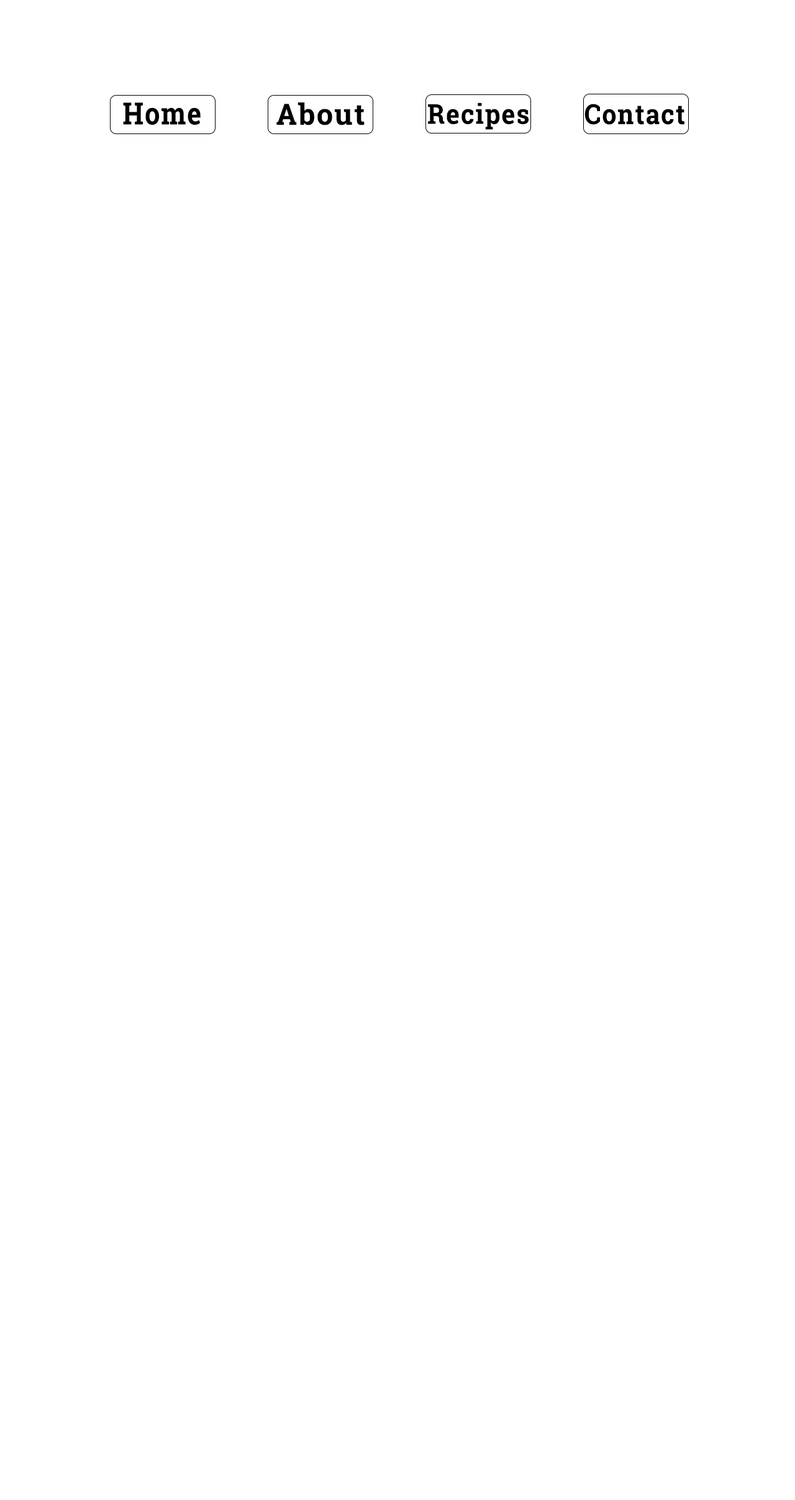
<style>
.page{position:relative;width:795px;height:1500px;background:#ffffff}
.page>*{position:absolute;margin:0}
.t1{font:30.6px "RobotoSlab-Bold";letter-spacing:0.05em;color:#000000;scale:0.87 1}
.t2{font:29.1px "RobotoSlab-Bold";letter-spacing:0.05em;color:#000000}
.t3{font:27.4px "RobotoSlab-Bold";letter-spacing:0.05em;color:#000000;scale:0.93 1}
.t4{font:27.7px "RobotoSlab-Bold";letter-spacing:0.05em;color:#000000;scale:0.92 1}
</style>
<div class="page">
<p class="t1" style="left:123px;top:102px;width:78px;height:23px">Home</p>
<p class="t2" style="left:276px;top:102px;width:89px;height:23px">About</p>
<p class="t3" style="left:428px;top:102px;width:101px;height:28px">Recipes</p>
<p class="t4" style="left:584px;top:104px;width:101px;height:21px">Contact</p>
</div>
